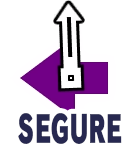
<style>
.page{position:relative;width:126px;height:150px;background:#ffffff}
.page>*{position:absolute;margin:0}
.t1{font:37.3px "RodinNTLGPro-UB";color:#272850;scale:0.62 1}
</style>
<div class="page">
<p class="t1" style="left:18px;top:113px;width:104px;height:31px">SEGURE</p>
</div>
